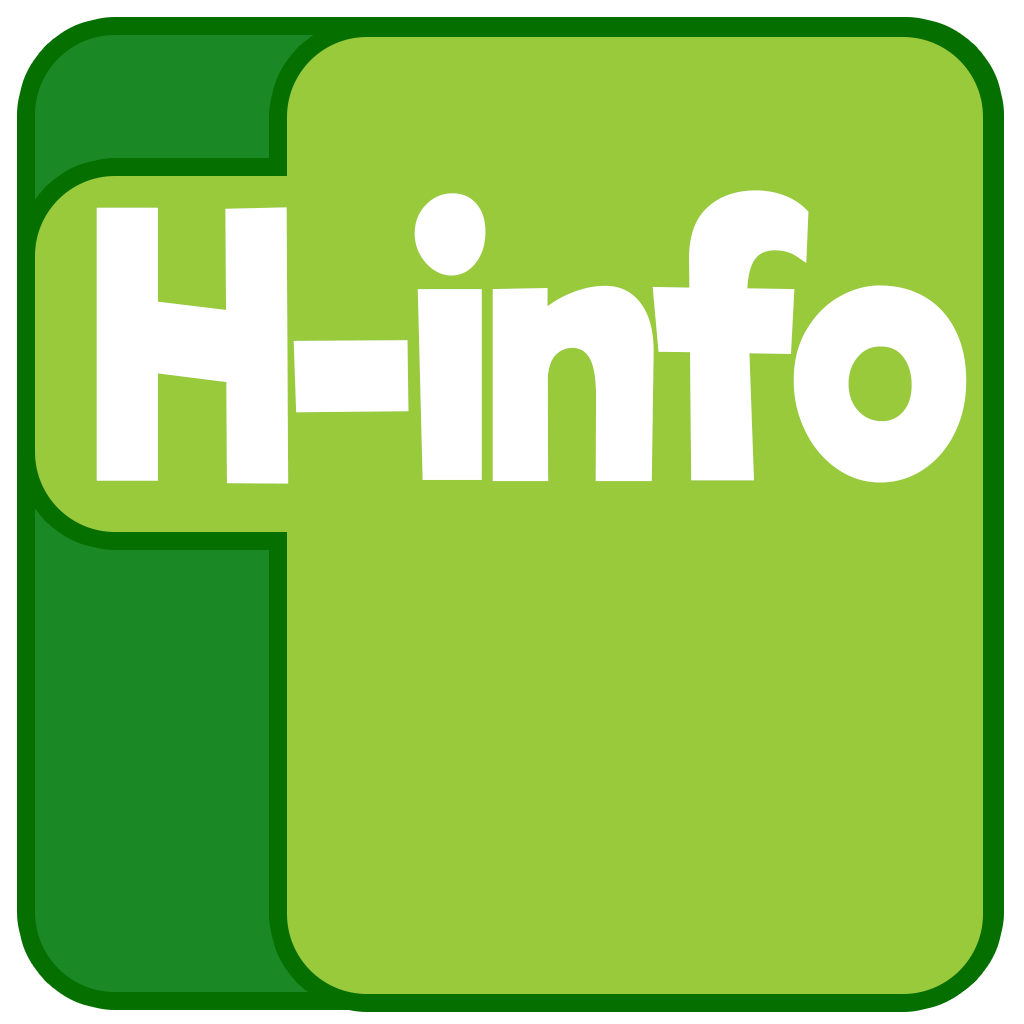
<style>
.page{position:relative;width:1024px;height:1024px;background:#99ca3c}
.page>*{position:absolute;margin:0}
.t1{font:360px "RifficFree-Bold";color:#ffffff;scale:0.85 1}
</style>
<div class="page">
<p class="t1" style="left:96px;top:190px;width:871px;height:294px">H-info</p>
</div>
